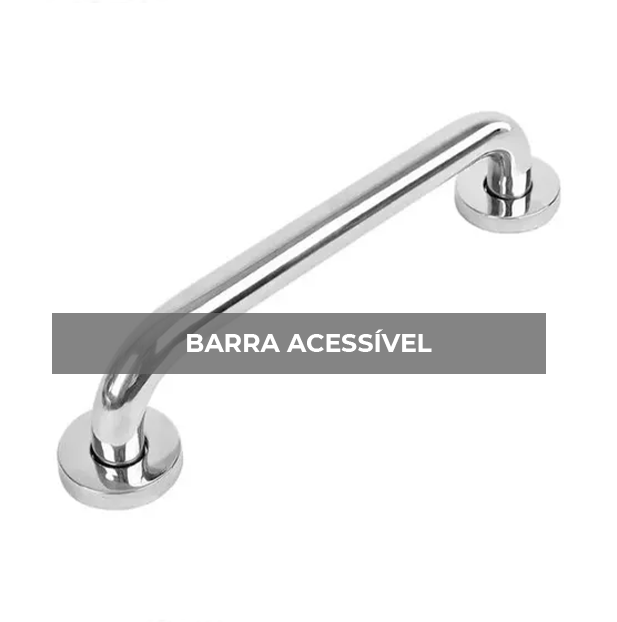
<style>
.page{position:relative;width:617px;height:622px;background:#ffffff}
.page>*{position:absolute;margin:0}
.t1{font:25.1px "Montserrat-Bold";color:#ffffff;text-transform:uppercase}
</style>
<div class="page">
<p class="t1" style="left:187px;top:329px;width:245px;height:23px">Barra acessível</p>
</div>
